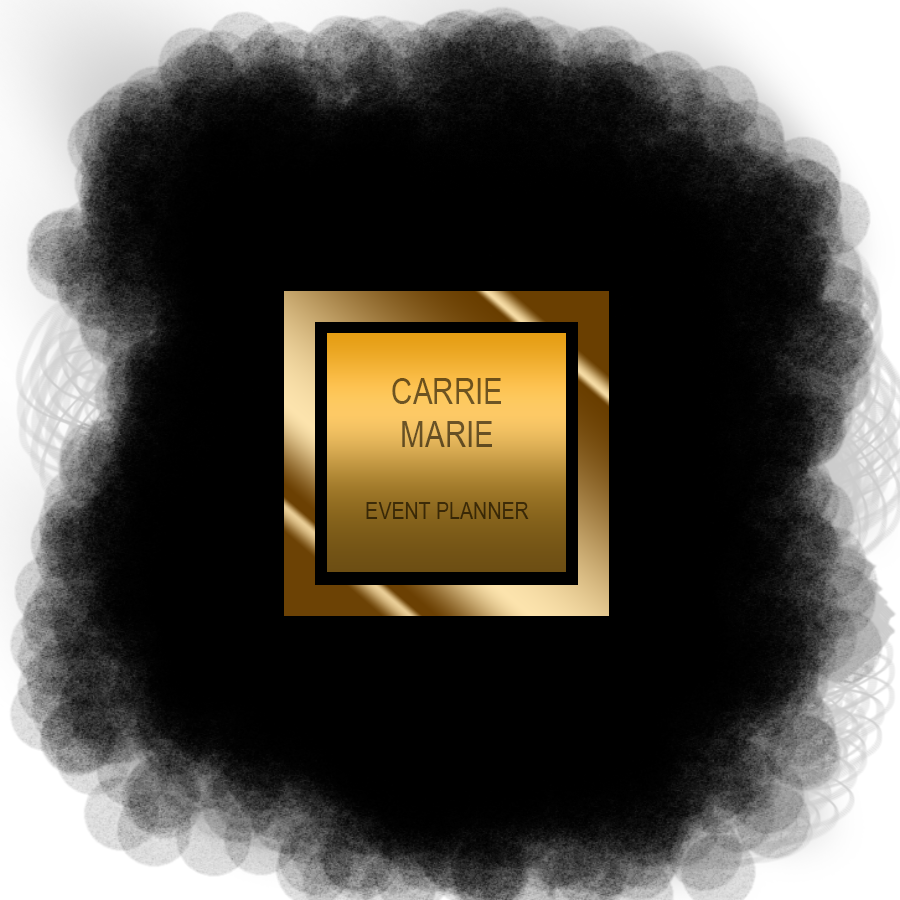
<style>
.page{position:relative;width:900px;height:900px;background:#000000}
.page>*{position:absolute;margin:0}
.t1{font:24px "ArialNarrow";color:#685020}
.t2{font:36px "ArialNarrow";color:#685020}
</style>
<div class="page">
<p class="t1" style="left:366px;top:378px;width:163px;height:141px;text-align:center"><span class="t2">CARRIE<br>MARIE<br><br></span>EVENT PLANNER</p>
</div>
